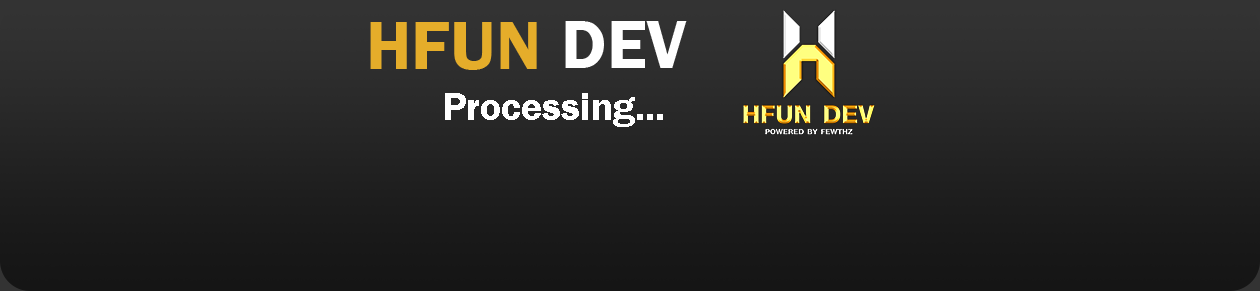
<style>
.page{position:relative;width:1260px;height:291px}
.page>*{position:absolute;margin:0}
.t1{font:70px "FranklinGothic-Demi";color:#e5ad2a}
.t2{font:70px "FranklinGothic-Demi";color:#ffffff}
.t3{font:40px "FranklinGothic-Demi";color:#ffffff}
</style>
<div class="page">
<p class="t1" style="left:370px;top:22px;width:167px;height:48px">HFUN</p>
<p class="t2" style="left:565px;top:21px;width:122px;height:47px">DEV</p>
<p class="t3" style="left:445px;top:93px;width:218px;height:34px">Processing...</p>
</div>
